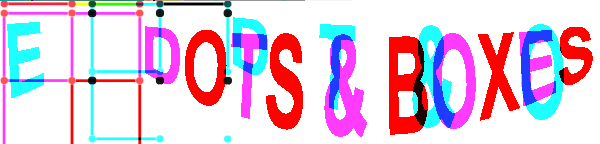
<style>
.page{position:relative;width:600px;height:144px;background:#ffffff}
.page>*{position:absolute;margin:0}
.t1{font:60px "Arial-BoldMT"}
</style>
<div class="page">
<p class="t1" style="left:145px;top:17px;width:448px;height:111px">DOTS &amp; BOXES</p>
</div>
